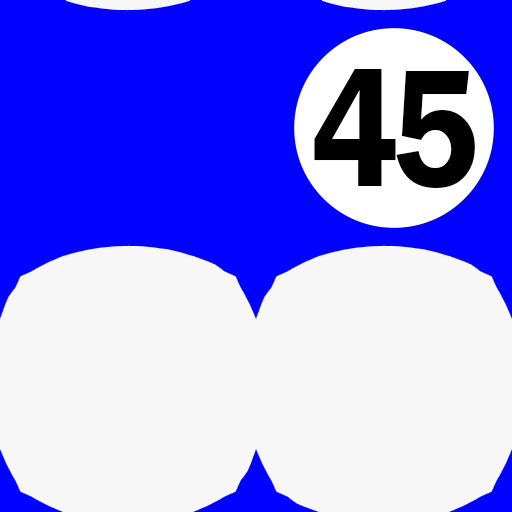
<style>
.page{position:relative;width:512px;height:512px;background:#f7f7f7}
.page>*{position:absolute;margin:0}
.t1{font:172.5px "FranklinGothic-Demi";letter-spacing:-0.05em;color:#010101;scale:0.87 1}
</style>
<div class="page">
<p class="t1" style="left:314px;top:69px;width:161px;height:119px">45</p>
</div>
